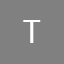
<style>
.page{position:relative;width:64px;height:64px;background:#808080}
.page>*{position:absolute;margin:0}
.t1{font:36px "Calibri";color:#feffff}
</style>
<div class="page">
<p class="t1" style="left:23px;top:20px;width:18px;height:23px">T</p>
</div>
